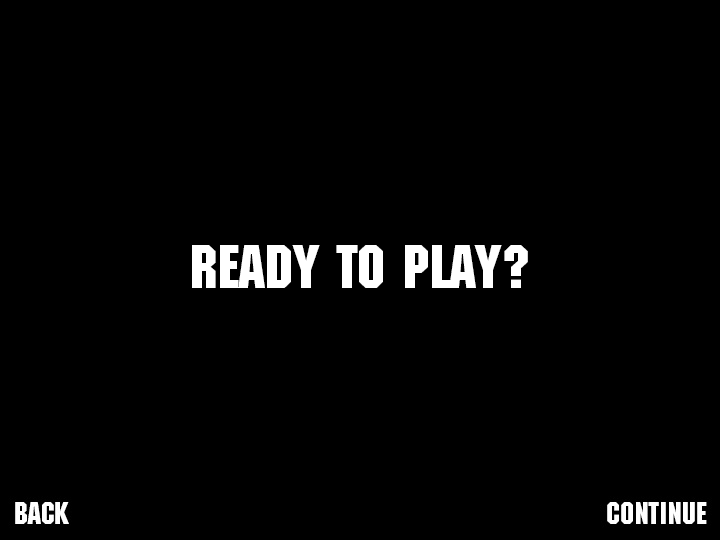
<style>
.page{position:relative;width:720px;height:540px;background:#000000}
.page>*{position:absolute;margin:0}
.t1{font:60px "MachineStd";color:#ffffff}
</style>
<div class="page">
<p class="t1" style="left:192px;top:245px;width:336px;height:43px">READY TO PLAY?</p>
</div>
